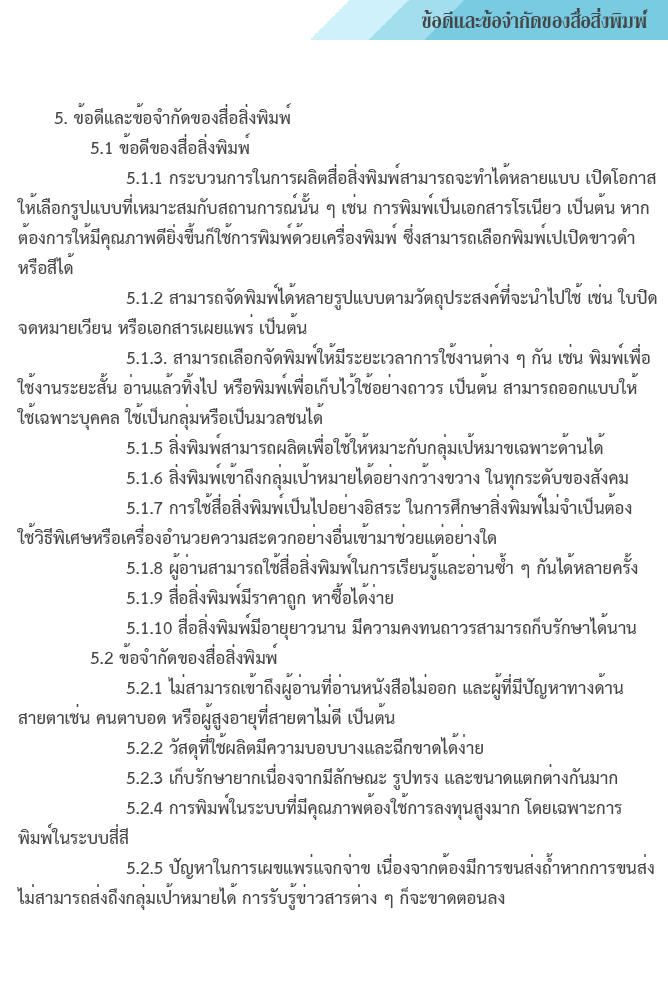
<style>
.page{position:relative;width:668px;height:1000px;background:#ffffff}
.page>*{position:absolute;margin:0}
.t1{font:29.2px "KodchiangUPCBold";color:#444545}
.t2{font:25px "THSarabunPSK-Bold";color:#444545}
</style>
<div class="page">
<p class="t1" style="left:421px;top:8px;width:227px;height:20px">ข้อดีและข้อจำกัดของสื่อสิ่งพิมพ์์</p>
<p class="t2" style="left:17px;top:103px;width:640px;height:807px">5. ข้อดีและข้อจำกัดของสื่อสิ่งพิมพ์<br>  5.1 ข้อดีของสื่อสิ่งพิมพ์<br>   5.1.1 กระบวนการในการผลิตสื่อสิ่งพิมพ์สามารถจะทำได้หลายแบบ เปิดโอกาสให้เลือกรูปแบบที่เหมาะสมกับสถานการณ์นั้น ๆ เช่น การพิมพ์เป็นเอกสารโรเนียว เป็นต้น หากต้องการให้มีคุณภาพดียิ่งขึ้นก็ใช้การพิมพ์ด้วยเครื่องพิมพ์ ซึ่งสามารถเลือกพิมพ์เปเปิดขาวดำหรือสีได้<br>   5.1.2 สามารถจัดพิมพ์ได้หลายรูปแบบตามวัตถุประสงค์ที่จะนำไปใช้ เช่น ใบปิดจดหมายเวียน หรือเอกสารเผยแพร่ เป็นต้น<br>   5.1.3. สามารถเลือกจัดพิมพ์ให้มีระยะเวลาการใช้งานต่าง ๆ กัน เช่น พิมพ์เพื่อใช้งานระยะสั้น อ่านแล้วทิ้งไป หรือพิมพ์เพื่อเก็บไว้ใช้อย่างถาวร เป็นต้น สามารถออกแบบให้ใช้เฉพาะบุคคล ใช้เป็นกลุ่มหรือเป็นมวลชนได้<br>   5.1.5 สิ่งพิมพ์สามารถผลิตเพื่อใช้ให้หมาะกับกลุ่มเป้หมาขเฉพาะด้านได้<br>   5.1.6 สิ่งพิมพ์เข้าถึงกลุ่มเป้าหมายได้อย่างกว้างขวาง ในทุกระดับของสังคม<br>   5.1.7 การใช้สื่อสิ่งพิมพ์เป็นไปอย่างอิสระ ในการศึกษาสิ่งพิมพ์ไม่จำเป็นต้องใช้วิธีพิเศษหรือเครื่องอำนวยความสะดวกอย่างอื่นเข้ามาช่วยแต่อย่างใด<br>   5.1.8 ผู้อ่านสามารถใช้สื่อสิ่งพิมพ์ในการเรียนรู้และอ่านซ้ำ ๆ กันได้หลายครั้ง<br>   5.1.9 สื่อสิ่งพิมพ์มีราคาถูก หาซื้อได้ง่าย<br>   5.1.10 สื่อสิ่งพิมพ์มีอายุยาวนาน มีความคงทนถาวรสามารถก็บรักษาได้นาน<br>  5.2 ข้อจำกัดของสื่อสิ่งพิมพ์<br>   5.2.1 ไม่สามารถเข้าถึงผู้อ่านที่อ่านหนังสือไม่ออก และผู้ที่มีปัญหาทางด้านสายตาเช่น คนตาบอด หรือผู้สูงอายุที่สายตาไม่ดี เป็นต้น<br>   5.2.2 วัสดุที่ใช้ผลิตมีความบอบบางและฉีกขาดได้ง่าย<br>   5.2.3 เก็บรักษายากเนื่องจากมีลักษณะ รูปทรง และขนาดแตกต่างกันมาก<br>   5.2.4 การพิมพ์ในระบบที่มีคุณภาพต้องใช้การลงทุนสูงมาก โดยเฉพาะการพิมพ์ในระบบสี่สี<br>   5.2.5 ปัญหาในการเผขแพร่แจกจ่าข เนื่องจากต้องมีการขนส่งถ้ำหากการขนส่งไม่สามารถส่งถึงกลุ่มเป้าหมายได้ การรับรู้ข่าวสารต่าง ๆ ก็จะขาดตอนลง</p>
</div>
